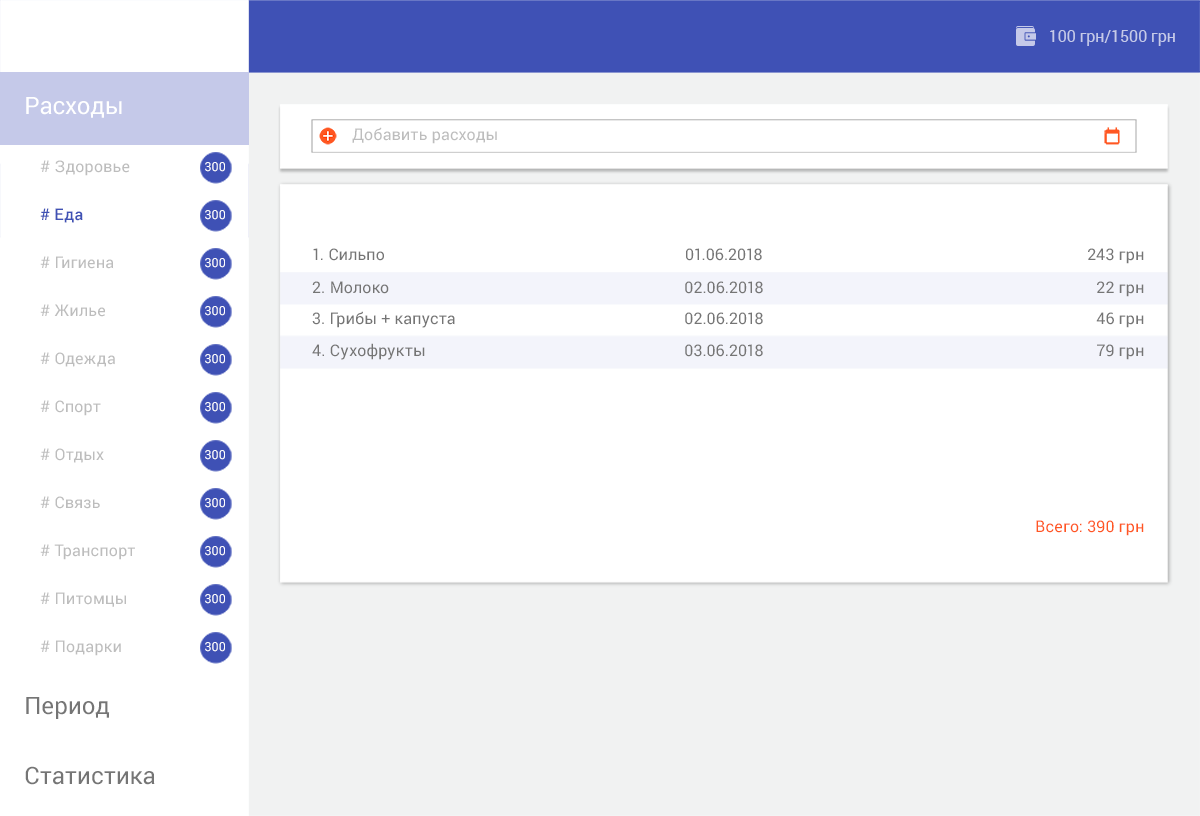
<style>
.page{position:relative;width:1200px;height:816px;background:#ffffff}
.page>*{position:absolute;margin:0}
.t1{font:16px "Roboto-Regular";color:#c5cae9}
.t2{font:24px "Roboto-Regular";color:#ffffff}
.t3{font:16px "Roboto-Regular";letter-spacing:0.01em;color:#bdbdbd}
.t4{font:12.5px "Roboto-Regular";letter-spacing:0.01em;color:#ffffff}
.t5{font:16px "Roboto-Medium";letter-spacing:0.01em;color:#3f51b5}
.t6{font:16px "Roboto-Regular";letter-spacing:0.01em;color:#757575}
.t7{font:16px "Roboto-Regular";letter-spacing:0.01em;color:#ff5722}
.t8{font:24px "Roboto-Regular";color:#757575}
</style>
<div class="page">
<p class="t1" style="left:1050px;top:30px;width:125px;height:16px">100 грн/1500 грн</p>
<p class="t2" style="left:26px;top:97px;width:96px;height:21px">Расходы</p>
<p class="t3" style="left:352px;top:127px;width:145px;height:17px">Добавить расходы</p>
<p class="t3" style="left:40px;top:160px;width:90px;height:16px"># Здоровье</p>
<p class="t4" style="left:205px;top:162px;width:20px;height:10px">300</p>
<p class="t5" style="left:40px;top:208px;width:43px;height:15px"># Еда</p>
<p class="t4" style="left:205px;top:210px;width:20px;height:10px">300</p>
<p class="t3" style="left:40px;top:256px;width:74px;height:13px"># Гигиена</p>
<p class="t6" style="left:313px;top:248px;width:71px;height:13px">1. Сильпо</p>
<p class="t6" style="left:686px;top:248px;width:76px;height:13px">01.06.2018</p>
<p class="t6" style="left:1088px;top:248px;width:56px;height:16px">243 грн</p>
<p class="t4" style="left:205px;top:258px;width:20px;height:10px">300</p>
<p class="t6" style="left:312px;top:281px;width:77px;height:13px">2. Молоко</p>
<p class="t6" style="left:685px;top:281px;width:78px;height:13px">02.06.2018</p>
<p class="t6" style="left:1097px;top:281px;width:47px;height:16px">22 грн</p>
<p class="t3" style="left:40px;top:304px;width:65px;height:13px"># Жилье</p>
<p class="t4" style="left:205px;top:306px;width:20px;height:10px">300</p>
<p class="t6" style="left:312px;top:311px;width:143px;height:17px">3. Грибы + капуста</p>
<p class="t6" style="left:685px;top:312px;width:78px;height:13px">02.06.2018</p>
<p class="t6" style="left:1096px;top:312px;width:48px;height:16px">46 грн</p>
<p class="t3" style="left:40px;top:352px;width:75px;height:15px"># Одежда</p>
<p class="t6" style="left:312px;top:343px;width:113px;height:17px">4. Сухофрукты</p>
<p class="t6" style="left:685px;top:344px;width:78px;height:13px">03.06.2018</p>
<p class="t6" style="left:1097px;top:344px;width:47px;height:16px">79 грн</p>
<p class="t4" style="left:205px;top:354px;width:20px;height:10px">300</p>
<p class="t3" style="left:40px;top:400px;width:61px;height:16px"># Спорт</p>
<p class="t4" style="left:205px;top:402px;width:20px;height:10px">300</p>
<p class="t3" style="left:40px;top:448px;width:64px;height:15px"># Отдых</p>
<p class="t4" style="left:205px;top:450px;width:20px;height:10px">300</p>
<p class="t3" style="left:40px;top:496px;width:60px;height:13px"># Связь</p>
<p class="t4" style="left:205px;top:498px;width:20px;height:10px">300</p>
<p class="t7" style="left:1036px;top:520px;width:108px;height:16px">Всего: 390 грн</p>
<p class="t3" style="left:40px;top:544px;width:95px;height:16px"># Транспорт</p>
<p class="t4" style="left:205px;top:546px;width:20px;height:10px">300</p>
<p class="t3" style="left:40px;top:592px;width:86px;height:15px"># Питомцы</p>
<p class="t4" style="left:205px;top:594px;width:20px;height:10px">300</p>
<p class="t3" style="left:40px;top:640px;width:81px;height:16px"># Подарки</p>
<p class="t4" style="left:205px;top:642px;width:20px;height:10px">300</p>
<p class="t8" style="left:26px;top:697px;width:84px;height:22px">Период</p>
<p class="t8" style="left:25px;top:766px;width:130px;height:19px">Статистика</p>
</div>
